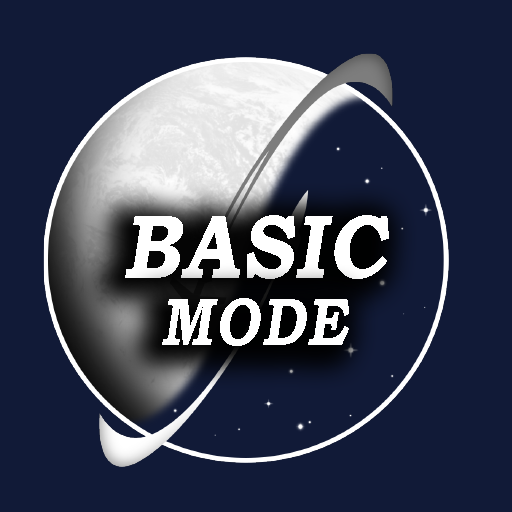
<style>
.page{position:relative;width:512px;height:512px;background:#111a37}
.page>*{position:absolute;margin:0}
.t1{font:90.9px "BookmanOldStyle-Bold";letter-spacing:0.013em;color:#ffffff;font-style:italic;scale:0.88 1}
.t2{font:66.9px "BookmanOldStyle-Bold";letter-spacing:0.013em;color:#ffffff;font-style:italic;scale:0.84 1}
</style>
<div class="page">
<p class="t1" style="left:125px;top:215px;width:264px;height:64px">BASIC</p>
<p class="t2" style="left:162px;top:298px;width:187px;height:48px">MODE</p>
</div>
